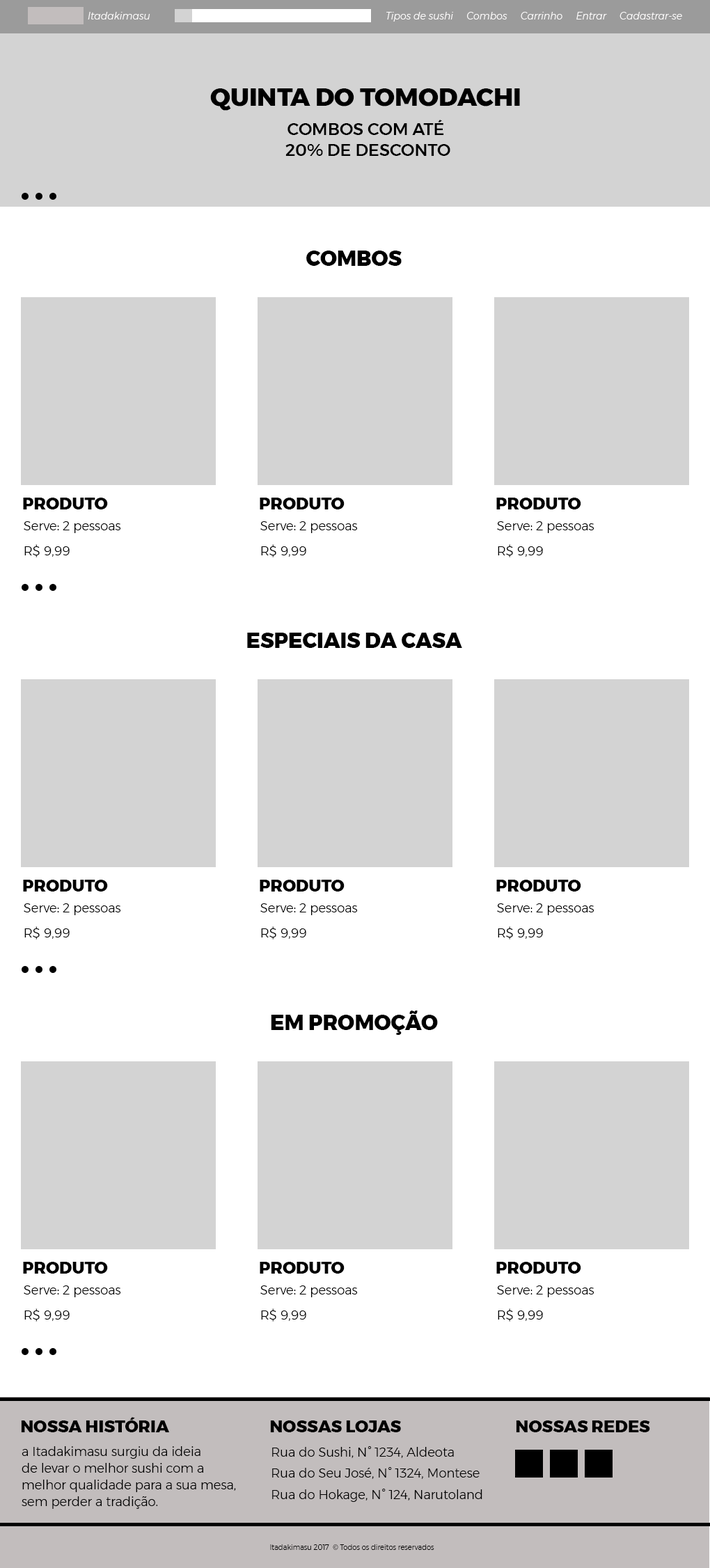
<style>
.page{position:relative;width:710px;height:1568px;background:#ffffff}
.page>*{position:absolute;margin:0}
.t1{font:9.7px "Montserrat-LightItalic";color:#fefcfc}
.t2{font:25.1px "Montserrat-ExtraBold";color:#000000;text-transform:uppercase}
.t3{font:16.7px/20.9px "Montserrat-Medium";color:#000000;text-transform:uppercase}
.t4{font:20.9px "Montserrat-ExtraBold";color:#000000;text-transform:uppercase}
.t5{font:16.7px "Montserrat-ExtraBold";color:#000000;text-transform:uppercase}
.t6{font:12.5px/25.1px "Montserrat-Light";color:#000000}
.t7{font:12.5px/16.7px "Montserrat-Light";color:#000000}
.t8{font:12.5px "Montserrat-Light";color:#000000}
.t9{font:7px "Montserrat-Light";color:#000000}
</style>
<div class="page">
<p class="t1" style="left:88px;top:12px;width:62px;height:7px">Itadakimasu</p>
<p class="t1" style="left:386px;top:12px;width:296px;height:10px">Tipos de sushi     Combos     Carrinho     Entrar     Cadastrar-se</p>
<p class="t2" style="left:210px;top:88px;width:310px;height:23px">Quinta do Tomodachi</p>
<p class="t3" style="left:285px;top:120px;width:165px;height:36px;text-align:center">combos com até <br>20% de desconto</p>
<p class="t4" style="left:306px;top:251px;width:96px;height:15px">Combos</p>
<p class="t5" style="left:23px;top:498px;width:85px;height:11px">Produto</p>
<p class="t5" style="left:260px;top:498px;width:85px;height:11px">Produto</p>
<p class="t5" style="left:496px;top:498px;width:85px;height:11px">Produto</p>
<p class="t6" style="left:24px;top:521px;width:97px;height:36px">Serve: 2 pessoas<br>R$ 9,99</p>
<p class="t6" style="left:260px;top:521px;width:98px;height:36px">Serve: 2 pessoas<br>R$ 9,99</p>
<p class="t6" style="left:497px;top:521px;width:97px;height:36px">Serve: 2 pessoas<br>R$ 9,99</p>
<p class="t4" style="left:247px;top:633px;width:215px;height:15px">especiais da casa</p>
<p class="t5" style="left:23px;top:880px;width:85px;height:12px">Produto</p>
<p class="t5" style="left:260px;top:880px;width:85px;height:12px">Produto</p>
<p class="t5" style="left:496px;top:880px;width:85px;height:12px">Produto</p>
<p class="t6" style="left:24px;top:903px;width:97px;height:37px">Serve: 2 pessoas<br>R$ 9,99</p>
<p class="t6" style="left:260px;top:903px;width:98px;height:37px">Serve: 2 pessoas<br>R$ 9,99</p>
<p class="t6" style="left:497px;top:903px;width:97px;height:37px">Serve: 2 pessoas<br>R$ 9,99</p>
<p class="t4" style="left:271px;top:1011px;width:167px;height:24px">em promoção</p>
<p class="t5" style="left:23px;top:1262px;width:85px;height:12px">Produto</p>
<p class="t5" style="left:260px;top:1262px;width:85px;height:12px">Produto</p>
<p class="t5" style="left:496px;top:1262px;width:85px;height:12px">Produto</p>
<p class="t6" style="left:24px;top:1285px;width:97px;height:37px">Serve: 2 pessoas<br>R$ 9,99</p>
<p class="t6" style="left:260px;top:1285px;width:98px;height:37px">Serve: 2 pessoas<br>R$ 9,99</p>
<p class="t6" style="left:497px;top:1285px;width:97px;height:37px">Serve: 2 pessoas<br>R$ 9,99</p>
<p class="t5" style="left:21px;top:1417px;width:149px;height:15px">Nossa história</p>
<p class="t5" style="left:270px;top:1420px;width:131px;height:12px">Nossas lojas</p>
<p class="t5" style="left:516px;top:1420px;width:134px;height:12px">Nossas Redes</p>
<p class="t7" style="left:22px;top:1446px;width:214px;height:63px">a Itadakimasu surgiu da ideia<br>de levar o melhor sushi com a <br>melhor qualidade para a sua mesa,<br>sem perder a tradição.</p>
<p class="t8" style="left:272px;top:1446px;width:182px;height:12px">Rua do Sushi, N° 1234, Aldeota</p>
<p class="t8" style="left:272px;top:1467px;width:208px;height:12px">Rua do Seu José, N° 1324, Montese</p>
<p class="t8" style="left:272px;top:1489px;width:210px;height:13px">Rua do Hokage, N° 124, Narutoland</p>
<p class="t9" style="left:270px;top:1544px;width:164px;height:6px">Itadakimasu 2017  © Todos os direitos reservados</p>
</div>
